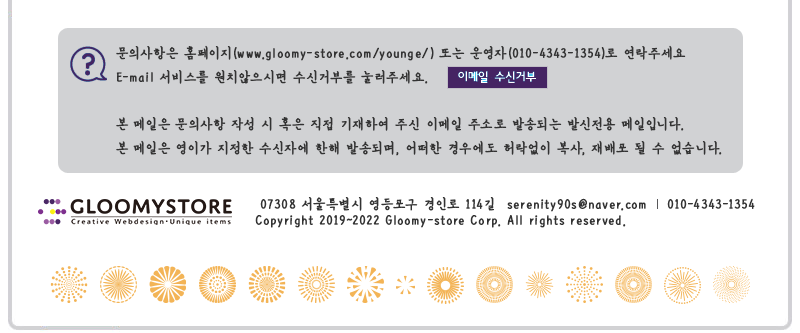
<style>
.page{position:relative;width:800px;height:333px;background:#ffffff}
.page>*{position:absolute;margin:0}
.t1{font:14px "KoreanEMPJ-M";letter-spacing:0.03em;color:#333333;font-weight:bold}
</style>
<div class="page">
<p class="t1" style="left:116px;top:45px;width:570px;height:16px">문의사항은 홈페이지(www.gloomy-store.com/younge/) 또는 운영자(010-4343-1354)로 연락주세요</p>
<p class="t1" style="left:116px;top:69px;width:312px;height:15px">E-mail 서비스를 원치않으시면 수신거부를 눌러주세요.</p>
<p class="t1" style="left:116px;top:116px;width:568px;height:15px">본 메일은 문의사항 작성 시 혹은 직접 기재하여 주신 이메일 주소로 발송되는 발신전용 메일입니다.</p>
<p class="t1" style="left:116px;top:140px;width:606px;height:16px">본 메일은 영이가 지정한 수신자에 한해 발송되며, 어떠한 경우에도 허락없이 복사, 재배포 될 수 없습니다.</p>
<p class="t1" style="left:260px;top:197px;width:234px;height:14px">07308 서울특별시 영등포구 경인로 114길</p>
<p class="t1" style="left:507px;top:198px;width:139px;height:14px">serenity90s@naver.com</p>
<p class="t1" style="left:667px;top:198px;width:88px;height:11px">010-4343-1354</p>
<p class="t1" style="left:255px;top:215px;width:371px;height:13px">Copyright 2019~2022 Gloomy-store Corp. All rights reserved.</p>
</div>
